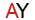
<style>
.page{position:relative;width:35px;height:20px;background:#ffffff}
.page>*{position:absolute;margin:0}
.t1{font:20px "ArialMT";color:#c72324}
.t2{font:20px "ArialMT";color:#000000}
</style>
<div class="page">
<p class="t1" style="left:5px;top:3px;width:14px;height:15px">A</p>
<p class="t2" style="left:16px;top:3px;width:13px;height:15px">Y</p>
</div>
